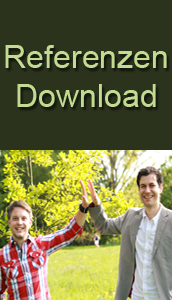
<style>
.page{position:relative;width:172px;height:300px;background:#2c331d}
.page>*{position:absolute;margin:0}
.t1{font:32.1px "ArialMT";color:#c2db91}
</style>
<div class="page">
<p class="t1" style="left:5px;top:45px;width:162px;height:62px;text-align:center">Referenzen<br>Download</p>
</div>
